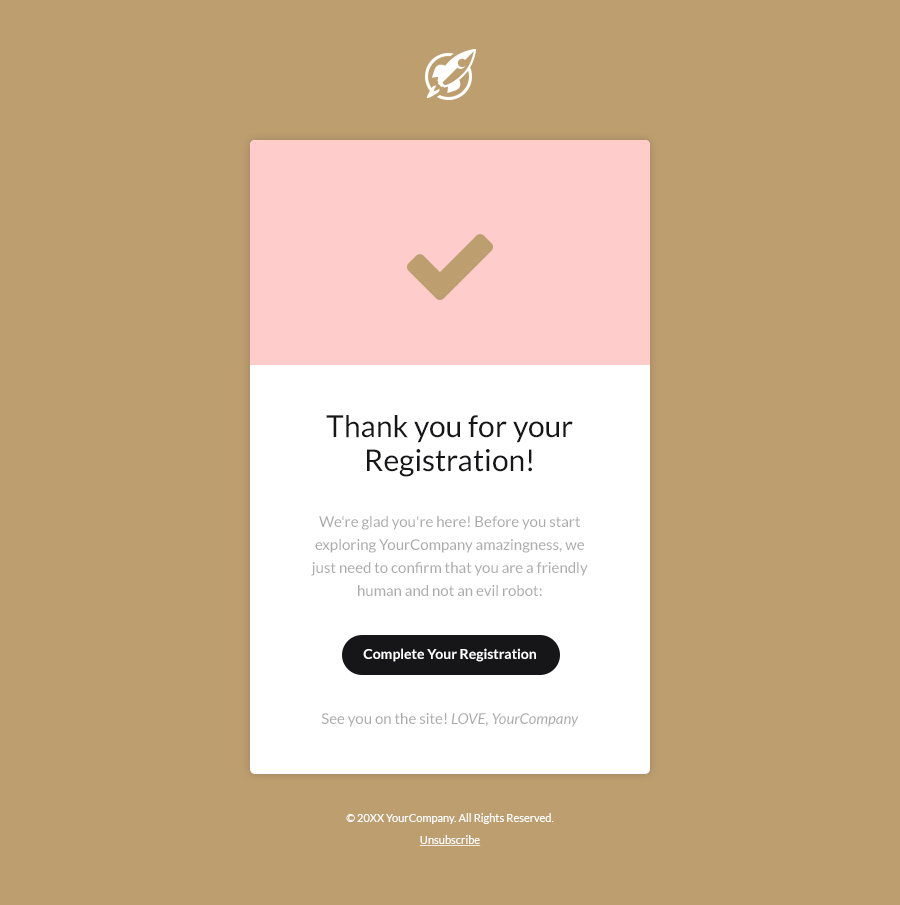
<style>
.page{position:relative;width:900px;height:905px;background:#bd9e6f}
.page>*{position:absolute;margin:0}
.t1{font:30px/34px "Lato-Regular";color:#161619}
.t2{font:15px/23px "Lato-Regular";color:#ababab}
.t3{font:14px "Lato-Bold";color:#ffffff}
.t4{font:15px "Lato-Regular";color:#ababab}
.t5{font:15px "Lato-Italic";color:#ababab}
.t6{font:11px/22px "Lato-Regular";color:#ffffff}
.t7{font:11px/22px "Lato-Regular";color:#ffffff;text-decoration:underline}
</style>
<div class="page">
<p class="t1" style="left:326px;top:415px;width:247px;height:62px;text-align:center">Thank you for your Registration!</p>
<p class="t2" style="left:311px;top:516px;width:277px;height:80px;text-align:center">We're glad you're here! Before you start  exploring YourCompany amazingness, we just need to confirm that you are a friendly human and not an evil robot:</p>
<p class="t3" style="left:363px;top:648px;width:173px;height:14px">Complete Your Registration</p>
<p class="t4" style="left:321px;top:713px;width:258px;height:14px">See you on the site! <span class="t5">LOVE, YourCompany</span></p>
<p class="t6" style="left:346px;top:813px;width:208px;height:33px;text-align:center">© 20XX YourCompany. All Rights Reserved.<br><span class="t7">Unsubscribe</span></p>
</div>
